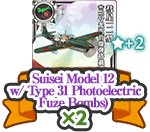
<style>
.page{position:relative;width:150px;height:132px;background:#ffffff}
.page>*{position:absolute;margin:0}
.t1{font:13px/12px "RyuminPro-ExBold";letter-spacing:-0.1em;color:#8d34b9;font-weight:bold}
.t2{font:18px "UDShinGoPro-Bold";letter-spacing:-0.08em;color:#4e8120;font-weight:bold}
</style>
<div class="page">
<p class="t1" style="left:9px;top:73px;width:133px;height:37px;text-align:center">Suisei Model 12 <br>w/ Type 31 Photoelectric<br>Fuze Bombs)</p>
<p class="t2" style="left:62px;top:110px;width:25px;height:16px">×2</p>
</div>
